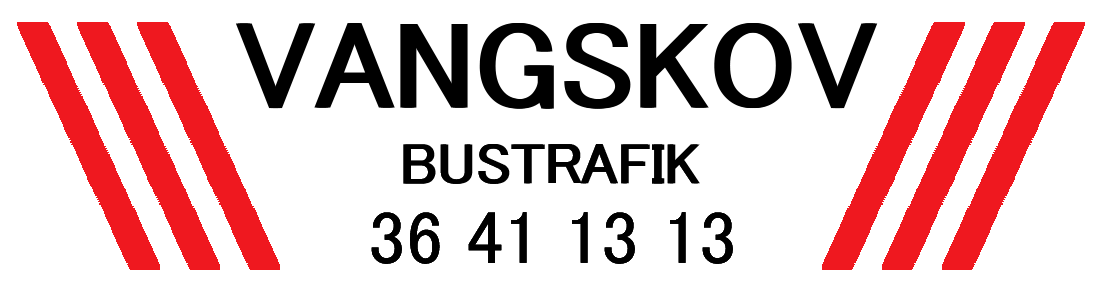
<style>
.page{position:relative;width:1104px;height:292px;background:#ffffff}
.page>*{position:absolute;margin:0}
.t1{font:125px "MS-UIGothic";color:#000000}
.t2{font:58.3px "MS-UIGothic";color:#000000}
.t3{font:75px "MS-UIGothic";color:#000000}
</style>
<div class="page">
<p class="t1" style="left:235px;top:23px;width:639px;height:86px">VANGSKOV</p>
<p class="t1" style="left:237px;top:23px;width:639px;height:86px">VANGSKOV</p>
<p class="t1" style="left:239px;top:23px;width:639px;height:86px">VANGSKOV</p>
<p class="t2" style="left:403px;top:144px;width:295px;height:40px">BUSTRAFIK</p>
<p class="t2" style="left:403px;top:144px;width:295px;height:40px">BUSTRAFIK</p>
<p class="t2" style="left:405px;top:144px;width:295px;height:40px">BUSTRAFIK</p>
<p class="t3" style="left:371px;top:212px;width:362px;height:52px">36 41 13 13</p>
<p class="t3" style="left:371px;top:212px;width:362px;height:52px">36 41 13 13</p>
<p class="t3" style="left:371px;top:212px;width:362px;height:52px">36 41 13 13</p>
</div>
